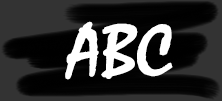
<style>
.page{position:relative;width:222px;height:101px;background:#333333}
.page>*{position:absolute;margin:0}
.t1{font:72px "ÊéÌå·»Ã×ÜÀÌå";color:#ffffff;font-weight:bold}
</style>
<div class="page">
<p class="t1" style="left:65px;top:21px;width:108px;height:59px">ABC</p>
</div>
